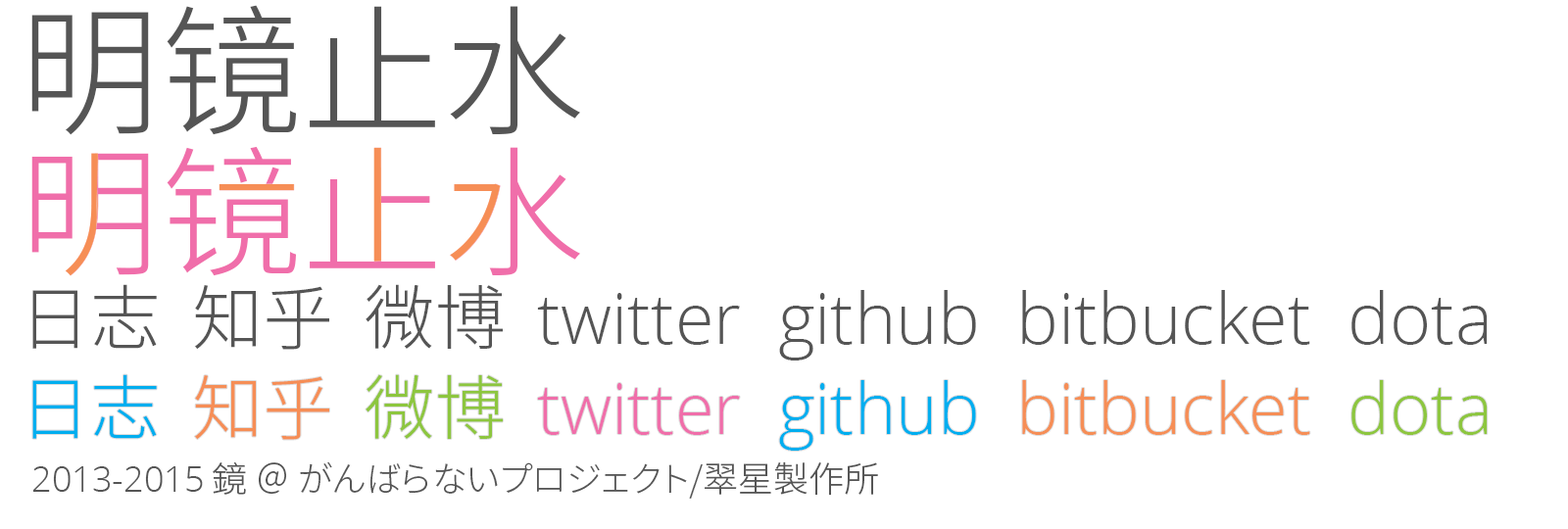
<style>
.page{position:relative;width:1568px;height:529px;background:#ffffff}
.page>*{position:absolute;margin:0}
.t1{font:141.1px "SourceHanSansSC-Light";color:#555555}
.t2{font:140.8px "SourceHanSansSC-Light";color:#f06eaa}
.t3{font:70.6px "OpenSans-Light";color:#555555}
.t4{font:70.6px "SourceHanSansSC-Light";color:#555555}
.t5{font:70.6px "OpenSans-Light";color:#f68e56}
.t6{font:70.6px "SourceHanSansSC-Light";color:#00aeef}
.t7{font:70.6px "SourceHanSansSC-Light";color:#f68e56}
.t8{font:70.6px "SourceHanSansSC-Light";color:#8dc63f}
.t9{font:70.6px "OpenSans-Light";color:#f06eaa}
.t10{font:70.6px "OpenSans-Light";color:#00aeef}
.t11{font:70.6px "OpenSans-Light";color:#8dc63f}
.t12{font:35.3px "SourceHanSansSC-Light";color:#555555}
.t13{font:35.3px "OpenSans-Light";color:#555555}
</style>
<div class="page">
<p class="t1" style="left:31px;top:5px;width:549px;height:130px">明镜止水</p>
<p class="t2" style="left:31px;top:146px;width:549px;height:130px">明镜止水</p>
<p class="t3" style="left:32px;top:284px;width:1456px;height:77px"><span class="t4">日志  知乎  微博  </span>twitter  github  bitbucket  dota</p>
<p class="t5" style="left:32px;top:374px;width:1456px;height:77px"><span class="t6">日志  </span><span class="t7">知乎  </span><span class="t8">微博  </span><span class="t9">twitter  </span><span class="t10">github  </span>bitbucket  <span class="t11">dota</span></p>
<p class="t12" style="left:32px;top:462px;width:846px;height:37px"><span class="t13">2013-2015</span> 鏡 ＠ がんばらないプロジェクト/翠星製作所</p>
</div>
